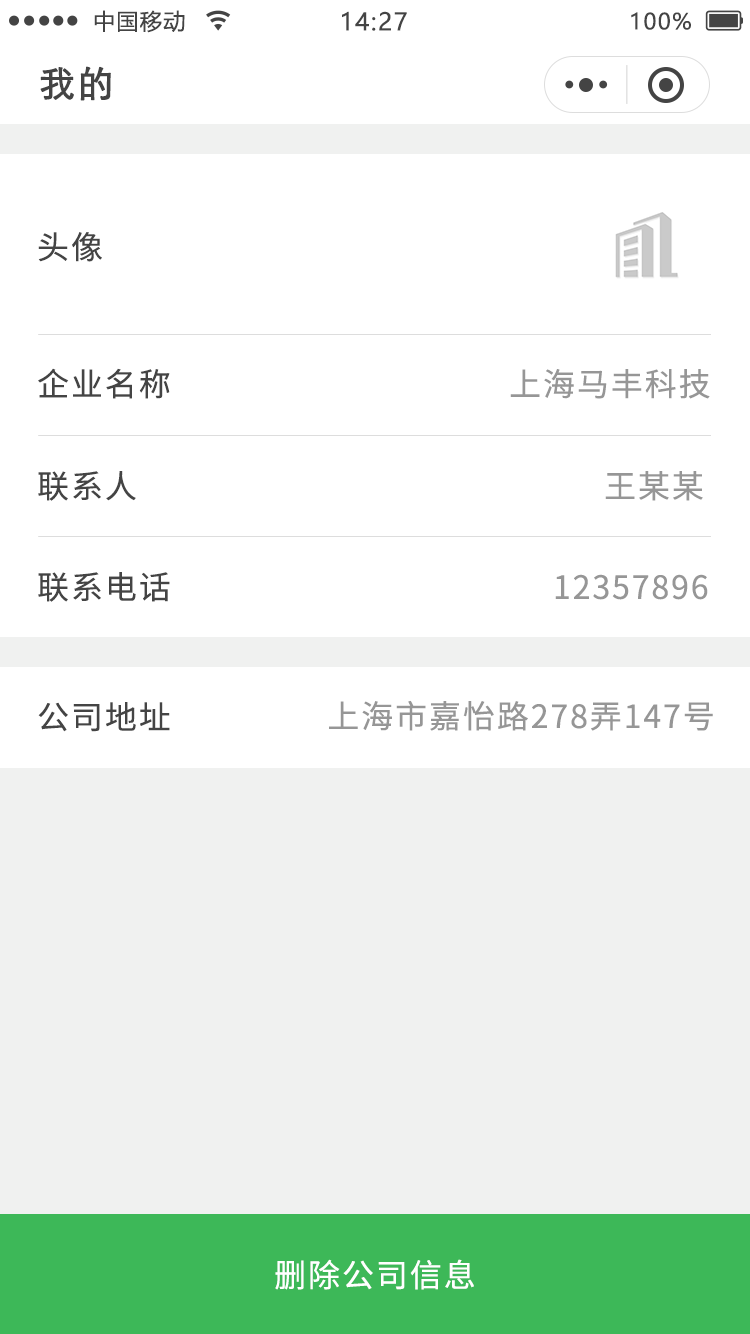
<style>
.page{position:relative;width:750px;height:1334px;background:#ffffff}
.page>*{position:absolute;margin:0}
.t1{font:22px "MicrosoftYaHei";letter-spacing:0.06em;color:#444444}
.t2{font:24px "MicrosoftYaHei";letter-spacing:0.06em;color:#444444}
.t3{font:36px "STXihei";letter-spacing:0.06em;color:#444444;font-weight:bold}
.t4{font:32px "NotoSansCJKsc-Regular";letter-spacing:0.06em;color:#444444}
.t5{font:32px "NotoSansCJKsc-Regular";letter-spacing:0.06em;color:#969696}
.t6{font:32px "NotoSansCJKsc-Regular";letter-spacing:0.06em;color:#ffffff}
</style>
<div class="page">
<p class="t1" style="left:94px;top:10px;width:91px;height:23px">中国移动</p>
<p class="t2" style="left:342px;top:11px;width:65px;height:20px">14:27</p>
<p class="t1" style="left:631px;top:12px;width:60px;height:18px">100%</p>
<p class="t3" style="left:40px;top:66px;width:71px;height:35px">我的</p>
<p class="t4" style="left:38px;top:232px;width:64px;height:30px">头像</p>
<p class="t4" style="left:38px;top:368px;width:132px;height:31px">企业名称</p>
<p class="t5" style="left:510px;top:369px;width:200px;height:30px">上海马丰科技</p>
<p class="t4" style="left:38px;top:471px;width:98px;height:30px">联系人</p>
<p class="t5" style="left:605px;top:471px;width:98px;height:30px">王某某</p>
<p class="t4" style="left:38px;top:572px;width:132px;height:30px">联系电话</p>
<p class="t5" style="left:555px;top:574px;width:153px;height:26px">12357896</p>
<p class="t4" style="left:38px;top:702px;width:132px;height:30px">公司地址</p>
<p class="t5" style="left:329px;top:700px;width:384px;height:31px">上海市嘉怡路278弄147号</p>
<p class="t6" style="left:275px;top:1259px;width:199px;height:31px">删除公司信息</p>
</div>
